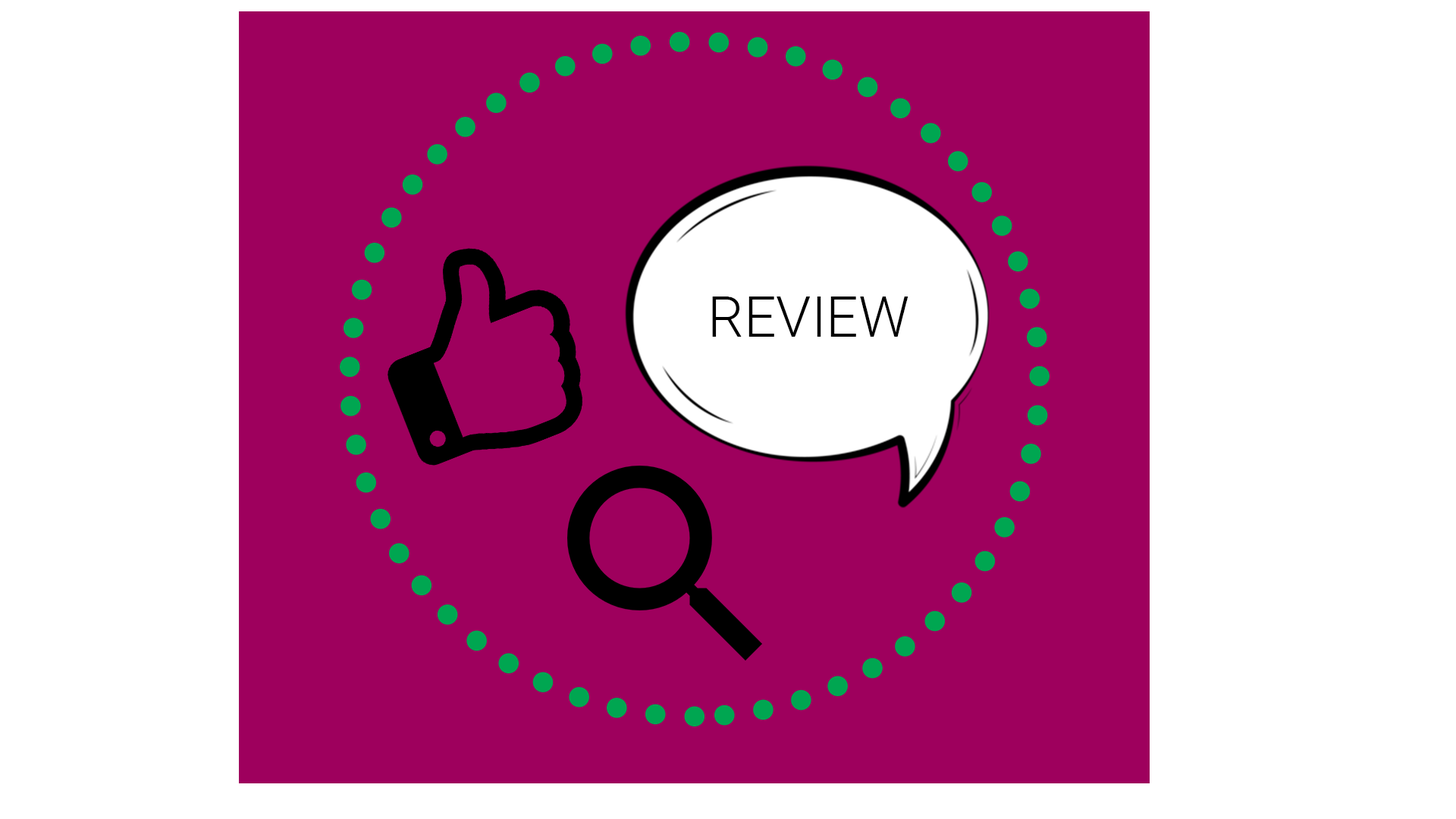
<style>
.page{position:relative;width:1456px;height:819px;background:#ffffff}
.page>*{position:absolute;margin:0}
.t1{font:56.9px "Roboto-Light";color:#000000}
</style>
<div class="page">
<p class="t1" style="left:712px;top:297px;width:196px;height:40px">REVIEW</p>
</div>
